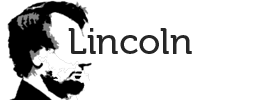
<style>
.page{position:relative;width:260px;height:100px;background:#ffffff}
.page>*{position:absolute;margin:0}
.t1{font:36px "Museo-500";color:#262626}
</style>
<div class="page">
<p class="t1" style="left:68px;top:28px;width:124px;height:26px">Lincoln</p>
</div>
